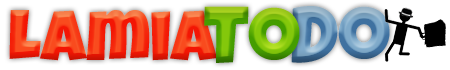
<style>
.page{position:relative;width:450px;height:70px;background:#ffffff}
.page>*{position:absolute;margin:0}
.t1{font:82px "LuckiestGuy-Regular"}
.t2{font:72px "LuckiestGuy-Regular"}
</style>
<div class="page">
<p class="t1" style="left:204px;top:6px;width:96px;height:57px">To</p>
<p class="t1" style="left:291px;top:6px;width:99px;height:57px">Do</p>
<p class="t2" style="left:9px;top:10px;width:209px;height:51px">Lamia</p>
</div>
